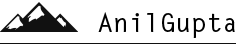
<style>
.page{position:relative;width:236px;height:54px;background:#ffffff}
.page>*{position:absolute;margin:0}
.t1{font:26px "LetterGothicStd-Bold";color:#000000}
</style>
<div class="page">
<p class="t1" style="left:98px;top:12px;width:137px;height:26px">AnilGupta</p>
</div>
